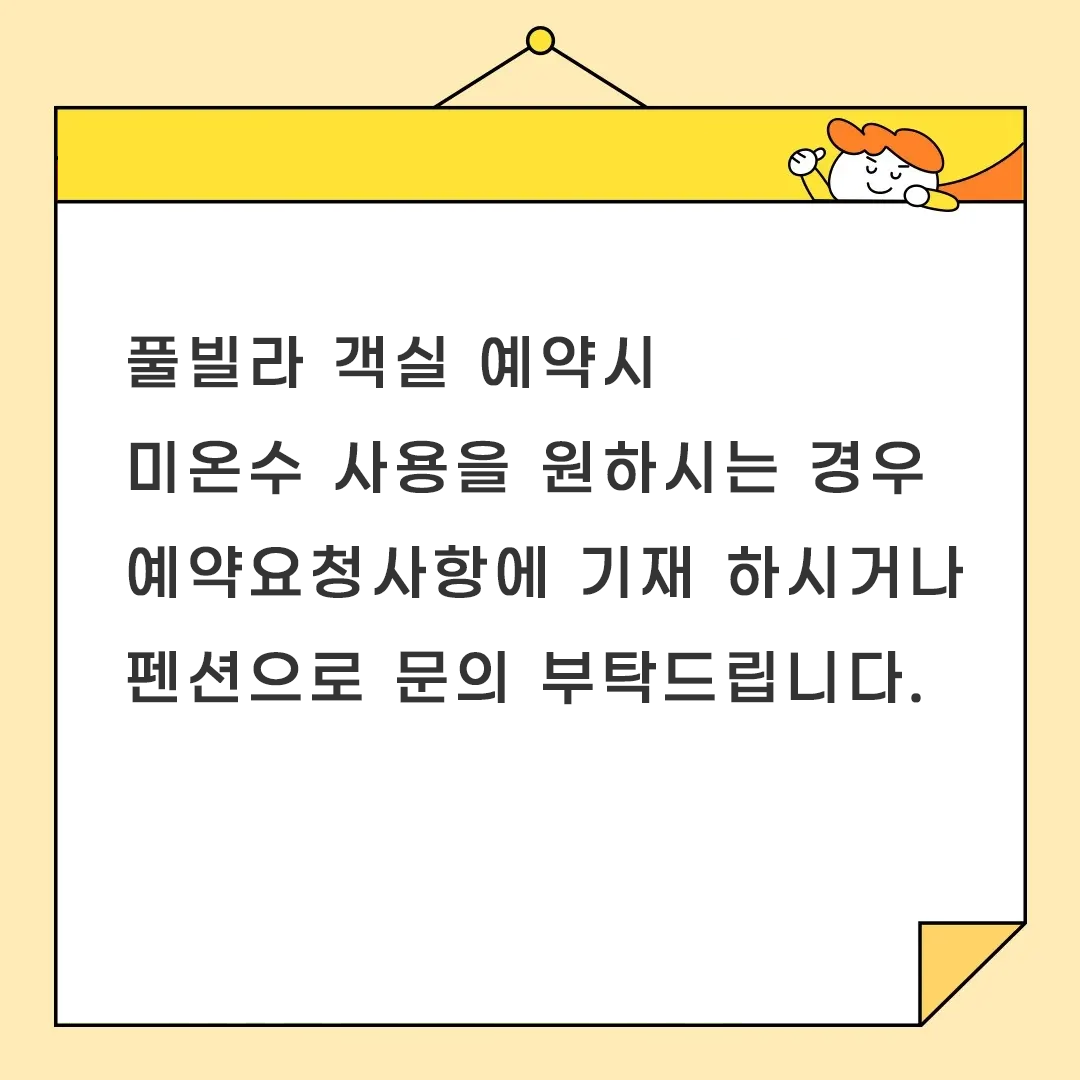
<style>
.page{position:relative;width:1080px;height:1080px;background:#ffffff}
.page>*{position:absolute;margin:0}
.t1{font:60px "GmarketSansMedium";letter-spacing:0.1em;color:#343434;font-weight:bold;scale:0.94 1}
</style>
<div class="page">
<p class="t1" style="left:127px;top:336px;width:836px;height:369px">풀빌라 객실 예약시 <br>미온수 사용을 원하시는 경우 <br>예약요청사항에 기재 하시거나 <br>펜션으로 문의 부탁드립니다.</p>
</div>
